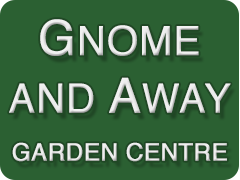
<style>
.page{position:relative;width:240px;height:180px;background:#2b6032}
.page>*{position:absolute;margin:0}
.t1{font:24px/48px "Helvetica";color:#eeeeee;font-weight:bold}
.t2{font:48px "Helvetica";color:#eeeeee;font-weight:bold}
.t3{font:40px "Helvetica";color:#eeeeee;font-weight:bold}
</style>
<div class="page">
<p class="t1" style="left:9px;top:19px;width:222px;height:143px;text-align:center"><span class="t2">G</span><span class="t3">NOME<br>AND </span><span class="t2">A</span><span class="t3">WAY<br></span>GARDEN CENTRE</p>
</div>
